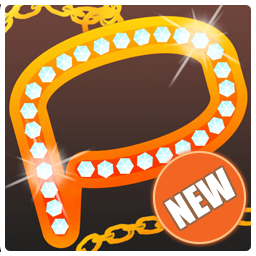
<style>
.page{position:relative;width:256px;height:256px}
.page>*{position:absolute;margin:0}
.t1{font:39.2px "Impact";color:#ffffff}
</style>
<div class="page">
<p class="t1" style="left:164px;top:167px;width:72px;height:63px;rotate:-32deg">NEW</p>
</div>
